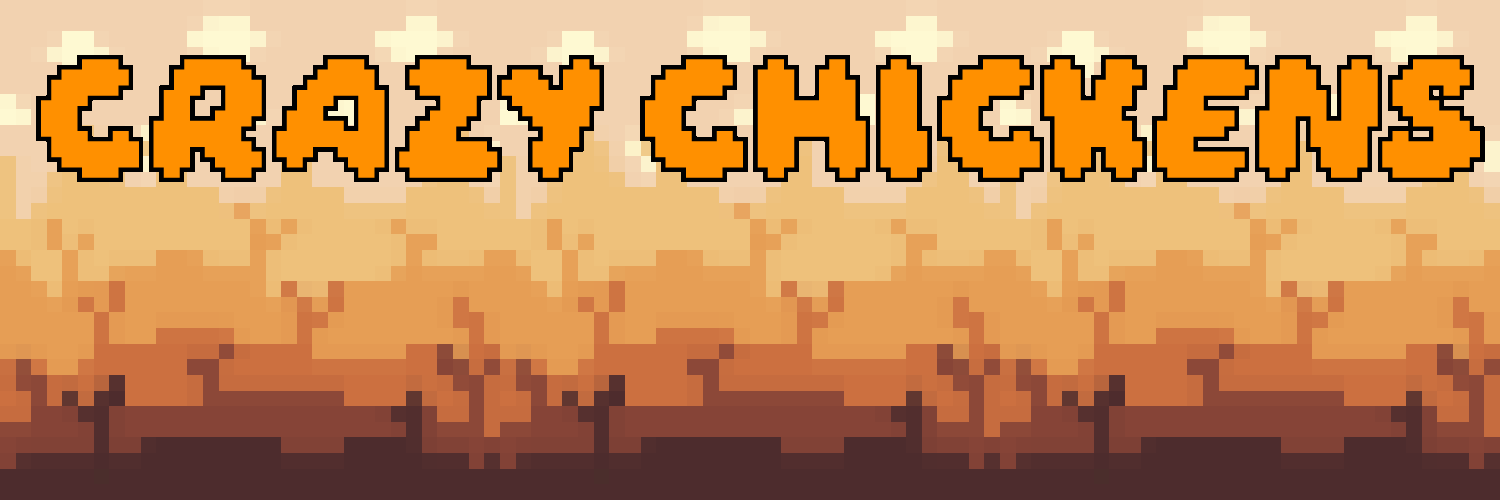
<style>
.page{position:relative;width:1500px;height:500px}
.page>*{position:absolute;margin:0}
.t1{font:109.2px "Daydream";color:#ff9000}
</style>
<div class="page">
<p class="t1" style="left:36px;top:55px;width:1449px;height:127px">Crazy Chickens</p>
</div>
